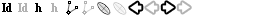
<style>
.page{position:relative;width:256px;height:16px;background:#ffffff}
.page>*{position:absolute;margin:0}
.t1{font:12px "TimesNewRomanPS-BoldMT";color:#000000}
.t2{font:12px "TimesNewRomanPS-BoldMT";color:#b2b2b2}
</style>
<div class="page">
<p class="t1" style="left:2px;top:3px;width:10px;height:9px">Id</p>
<p class="t2" style="left:18px;top:3px;width:10px;height:9px">Id</p>
<p class="t1" style="left:35px;top:3px;width:7px;height:9px">h</p>
<p class="t2" style="left:51px;top:3px;width:7px;height:9px">h</p>
</div>
